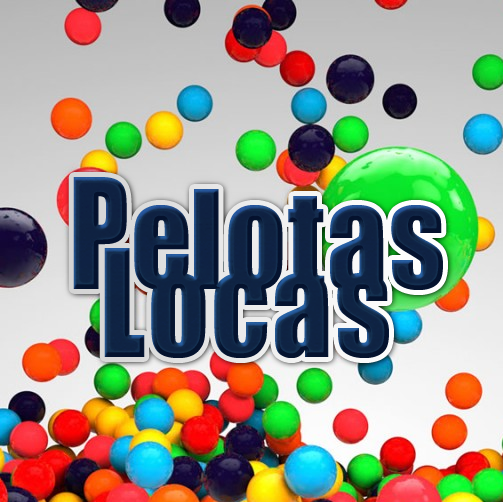
<style>
.page{position:relative;width:503px;height:502px}
.page>*{position:absolute;margin:0}
.t1{font:127.3px/68px "Impact";letter-spacing:0.02em;color:#0f2344;scale:0.93 1}
.t2{font:141.6px/68px "Impact";letter-spacing:0.02em;color:#0f2344;scale:0.84 1}
.t3{font:127.3px/68px "Impact";letter-spacing:-0.02em;color:#0f2344;scale:0.93 1}
.t4{font:138px/68px "Impact";letter-spacing:0.02em;color:#0f2344;scale:0.86 1}
</style>
<div class="page">
<p class="t1" style="left:73px;top:177px;width:370px;height:181px;text-align:center"><span class="t2">P</span><span class="t3">e</span>lotas<br> <span class="t4">L</span>ocas</p>
</div>
